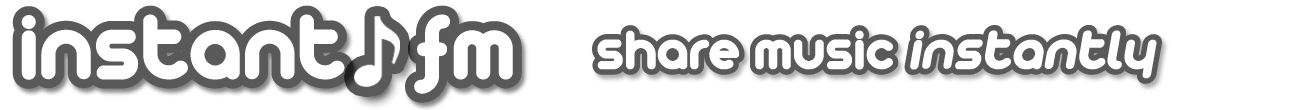
<style>
.page{position:relative;width:1300px;height:110px;background:#ffffff}
.page>*{position:absolute;margin:0}
.t1{font:100px "Arista2.0";letter-spacing:-0.025em;color:#ffffff;font-weight:bold}
.t2{font:60px "Arista2.0Fat";letter-spacing:-0.025em;font-weight:bold}
.t3{font:60px "Arista2.0Fat";letter-spacing:-0.025em;font-weight:bold;font-style:italic}
.t4{font:60px "Arista2.0";letter-spacing:-0.025em;color:#ffffff;font-weight:bold}
.t5{font:60px "Arista2.0";letter-spacing:-0.025em;color:#ffffff;font-weight:bold;font-style:italic}
</style>
<div class="page">
<p class="t1" style="left:21px;top:14px;width:492px;height:80px">instant   fm</p>
<p class="t2" style="left:592px;top:25px;width:570px;height:59px">share music <span class="t3">instantly</span></p>
<p class="t4" style="left:597px;top:30px;width:560px;height:49px">share music <span class="t5">instantly</span></p>
</div>
